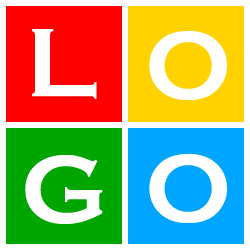
<style>
.page{position:relative;width:250px;height:250px;background:#ffffff}
.page>*{position:absolute;margin:0}
.t1{font:101px "CopperplateGothic-Bold";color:#ffffff}
</style>
<div class="page">
<p class="t1" style="left:32px;top:29px;width:65px;height:70px">L</p>
<p class="t1" style="left:149px;top:31px;width:78px;height:69px">O</p>
<p class="t1" style="left:25px;top:155px;width:78px;height:69px">G</p>
<p class="t1" style="left:149px;top:154px;width:78px;height:69px">O</p>
</div>
